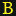
<style>
.page{position:relative;width:16px;height:16px;background:#111414}
.page>*{position:absolute;margin:0}
.t1{font:17.5px "Garamond";letter-spacing:0.03em;color:#fbf121}
</style>
<div class="page">
<p class="t1" style="left:2px;top:2px;width:11px;height:12px">B</p>
</div>
